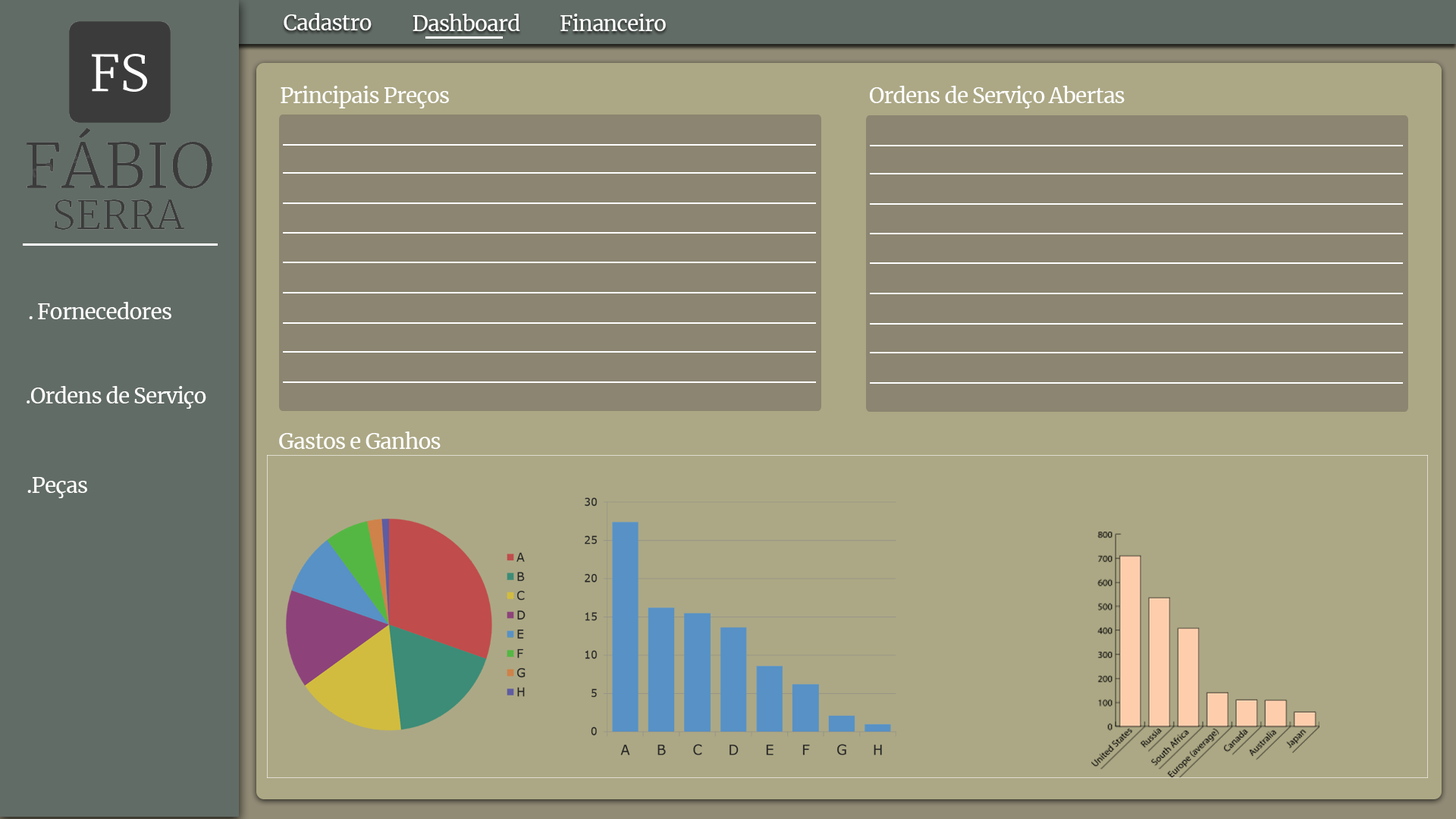
<style>
.page{position:relative;width:1456px;height:819px;background:#aca885}
.page>*{position:absolute;margin:0}
.t1{font:21.2px "Merriweather-Regular";letter-spacing:-0.03em;color:#ffffff}
</style>
<div class="page">
<p class="t1" style="left:284px;top:13px;width:88px;height:17px">Cadastro</p>
<p class="t1" style="left:413px;top:14px;width:107px;height:17px">Dashboard</p>
<p class="t1" style="left:560px;top:14px;width:106px;height:17px">Financeiro</p>
<p class="t1" style="left:281px;top:86px;width:168px;height:22px">Principais Preços</p>
<p class="t1" style="left:870px;top:86px;width:255px;height:22px">Ordens de Serviço Abertas</p>
<p class="t1" style="left:29px;top:302px;width:142px;height:17px">. Fornecedores</p>
<p class="t1" style="left:27px;top:386px;width:179px;height:23px">.Ordens de Serviço</p>
<p class="t1" style="left:279px;top:431px;width:162px;height:18px">Gastos e Ganhos</p>
<p class="t1" style="left:27px;top:477px;width:60px;height:21px">.Peças</p>
</div>
